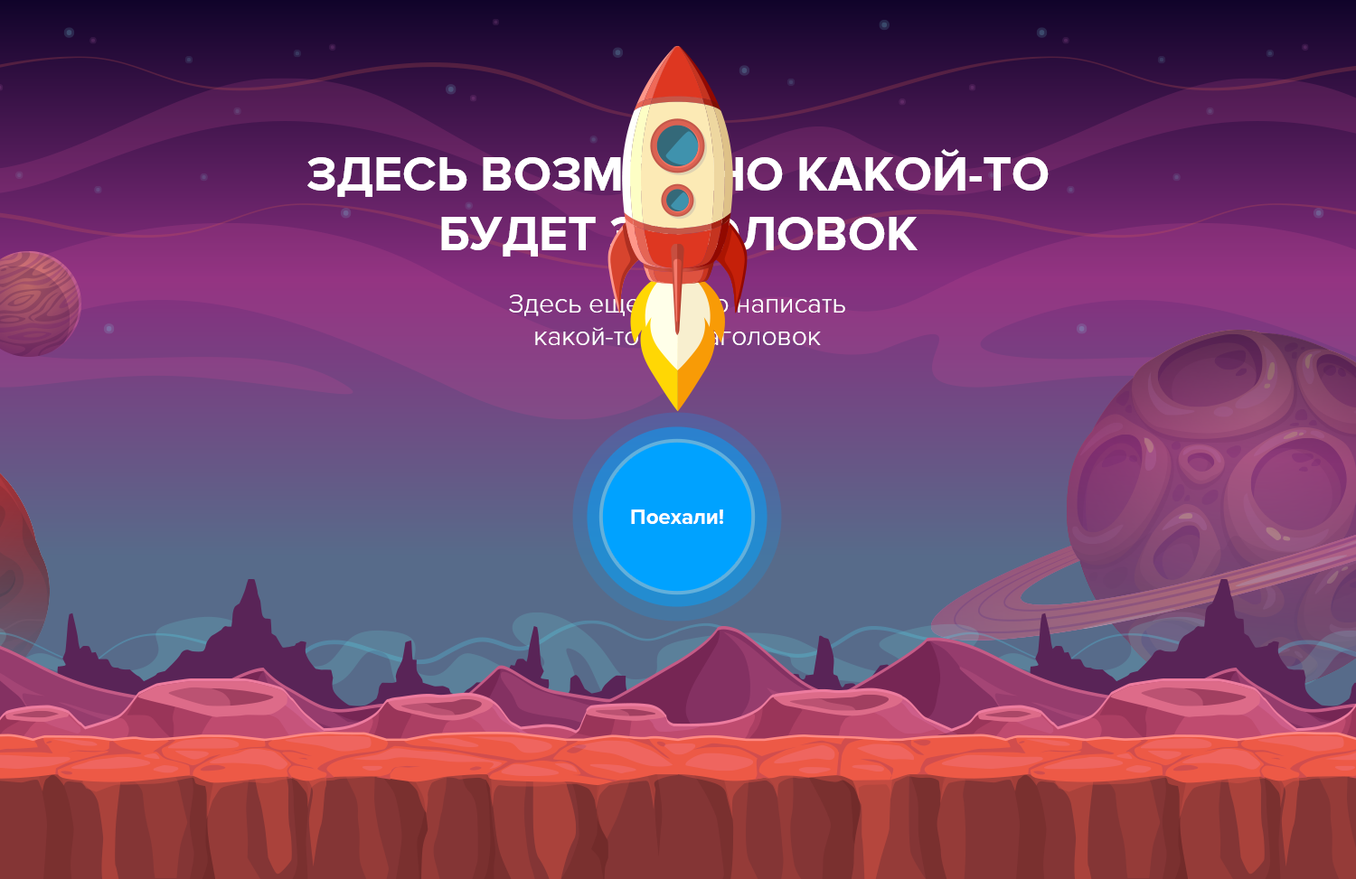
<style>
.page{position:relative;width:1356px;height:879px}
.page>*{position:absolute;margin:0}
.t1{font:49.7px "ProximaNova-Bold";color:#ffffff;text-transform:uppercase}
.t2{font:27.1px "ProximaNova-Light";color:#ffffff}
.t3{font:21.7px "ProximaNova-Bold";color:#ffffff}
</style>
<div class="page">
<p class="t1" style="left:307px;top:149px;width:742px;height:108px;text-align:center">Здесь возможно какой-то<br>будет заголовок</p>
<p class="t2" style="left:509px;top:295px;width:336px;height:54px;text-align:center">Здесь еще можно написать<br>какой-то подзаголовок</p>
<p class="t3" style="left:631px;top:510px;width:92px;height:14px">Поехали!</p>
</div>
